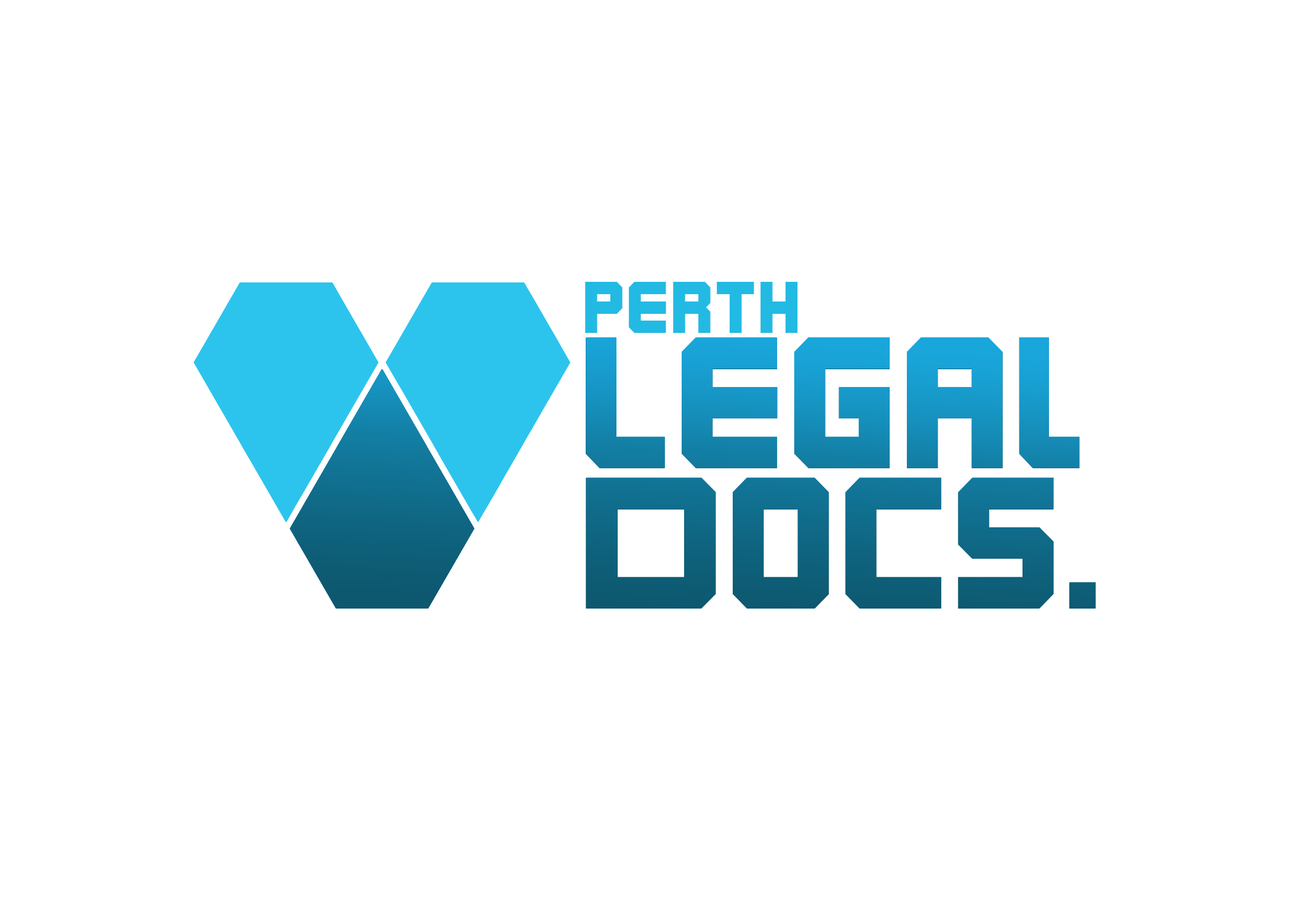
<style>
.page{position:relative;width:1292px;height:923px;background:#ffffff}
.page>*{position:absolute;margin:0}
.t1{font:67.8px "Karnivore-Bold";color:#22bae3}
.t2{font:174.3px "Karnivore-Bold"}
.t3{font:174.3px "Karnivore-Bold";color:#0f6682}
</style>
<div class="page">
<p class="t1" style="left:585px;top:282px;width:213px;height:51px">perth</p>
<p class="t2" style="left:586px;top:338px;width:494px;height:130px">Legal</p>
<p class="t3" style="left:586px;top:478px;width:510px;height:130px">Docs.</p>
</div>
